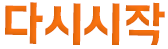
<style>
.page{position:relative;width:168px;height:49px;background:#ffffff}
.page>*{position:absolute;margin:0}
.t1{font:50px "BMHANNA11yrsold";color:#f06e0e}
</style>
<div class="page">
<p class="t1" style="left:5px;top:2px;width:160px;height:43px;rotate:1deg">다시시작</p>
</div>
